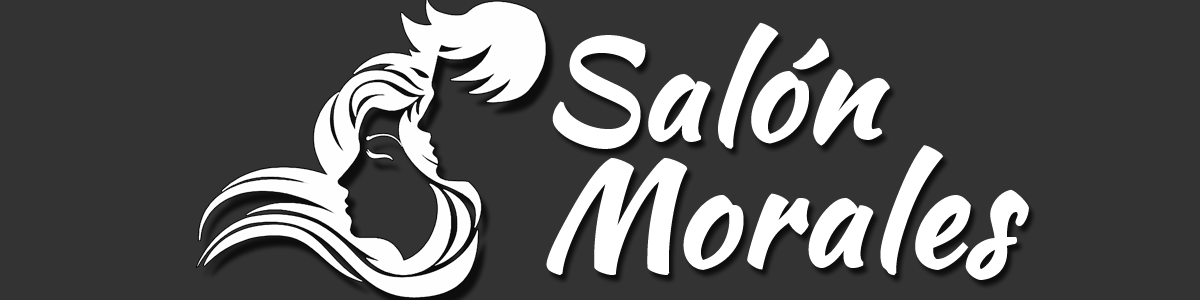
<style>
.page{position:relative;width:1200px;height:300px;background:#333333}
.page>*{position:absolute;margin:0}
.t1{font:135px "KaushanScript-Regular";color:#ffffff;font-weight:bold}
.t2{font:140px "KaushanScript-Regular";color:#ffffff;font-weight:bold}
</style>
<div class="page">
<p class="t1" style="left:552px;top:22px;width:338px;height:127px">Salón</p>
<p class="t2" style="left:546px;top:145px;width:483px;height:135px">Morales</p>
</div>
